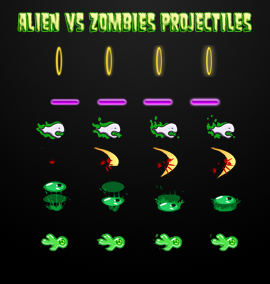
<style>
.page{position:relative;width:270px;height:284px}
.page>*{position:absolute;margin:0}
.t1{font:22.4px "SamdanEvil"}
</style>
<div class="page">
<p class="t1" style="left:18px;top:12px;width:233px;height:20px">Alien VS Zombies Projectiles</p>
</div>
